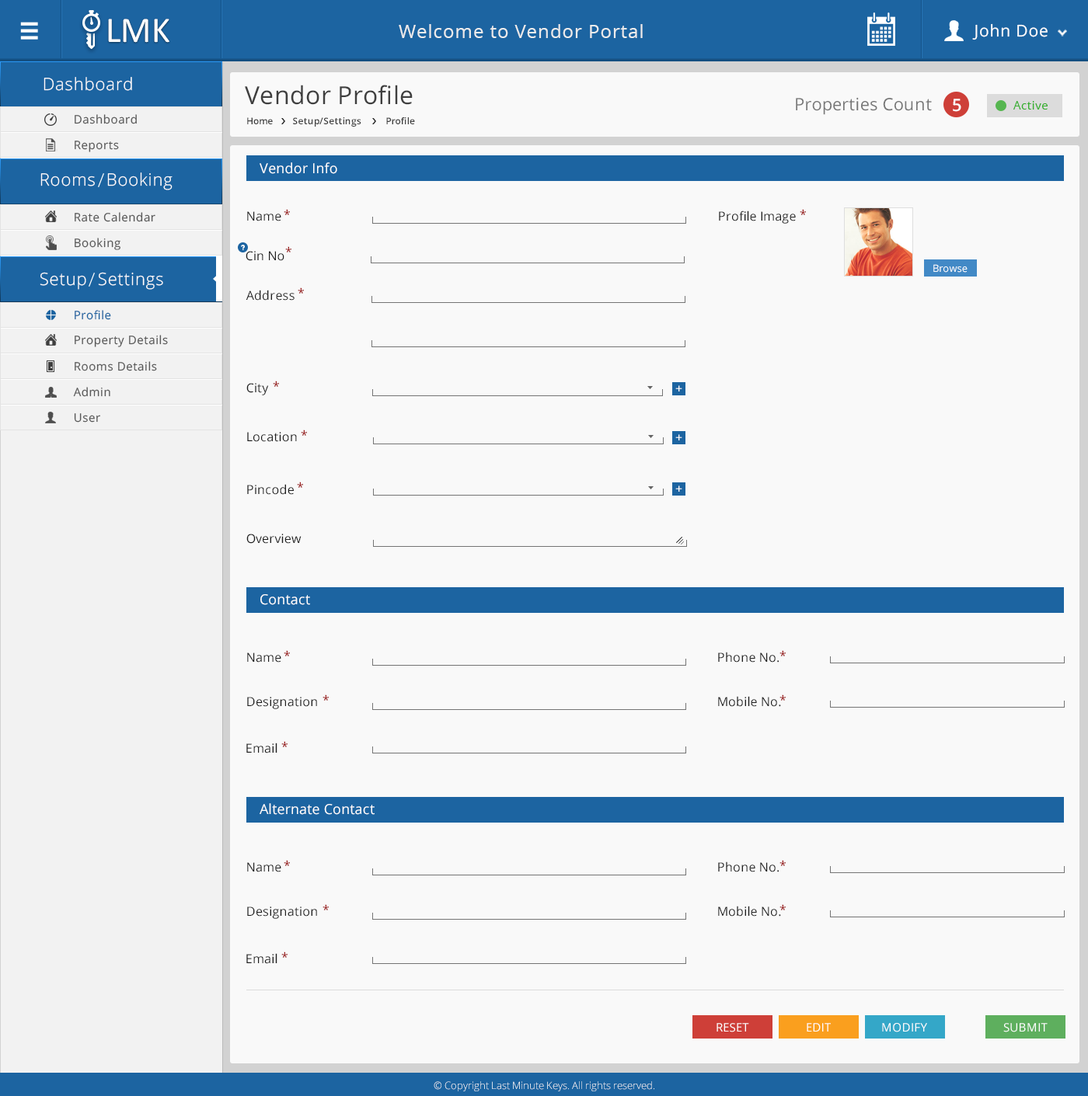
<style>
.page{position:relative;width:1088px;height:1096px;background:#f9f9f9}
.page>*{position:absolute;margin:0}
.t1{font:36.2px "Calibri";letter-spacing:0.01em;color:#ffffff}
.t2{font:18.6px "OpenSans";letter-spacing:0.04em;color:#ececec}
.t3{font:16.3px "OpenSans";letter-spacing:0.04em;color:#ffffff}
.t4{font:19.9px "NexaBold";letter-spacing:0.04em;color:#f9f9f9}
.t5{font:17.1px "OpenSans-Light";letter-spacing:0.04em;color:#ffffff}
.t6{font:24.9px "OpenSans";letter-spacing:0.01em;color:#3f3f3f}
.t7{font:17.1px "OpenSans";letter-spacing:0.01em;color:#777777}
.t8{font:17.1px "OpenSans-Semibold";letter-spacing:0.01em;color:#fefefe}
.t9{font:11.7px "OpenSans";letter-spacing:0.04em;color:#35af2d}
.t10{font:11.7px "OpenSans";letter-spacing:0.04em;color:#585858}
.t11{font:9.3px "OpenSans-Semibold";letter-spacing:0.01em;color:#3f3f3f}
.t12{font:14px "OpenSans";letter-spacing:0.01em;color:#ffffff}
.t13{font:12.4px "OpenSans";letter-spacing:0.01em;color:#940000}
.t14{font:12.4px "OpenSans";letter-spacing:0.01em;color:#1d1d1d}
.t15{font:10.1px "OpenSans";letter-spacing:0.01em;color:#ffffff}
.t16{font:11.7px "OpenSans";letter-spacing:0.04em;color:#1c64a1}
.t17{font:12.4px "OpenSans";letter-spacing:0.01em;color:#ffffff}
.t18{font:11.7px "OpenSans";letter-spacing:0.02em;color:#ffffff;text-transform:uppercase}
.t19{font:10.1px "OpenSans-Light";color:#ffffff}
</style>
<div class="page">
<p class="t1" style="left:108px;top:19px;width:61px;height:24px">LMK</p>
<p class="t2" style="left:399px;top:24px;width:244px;height:14px">Welcome to Vendor Portal</p>
<p class="t3" style="left:972px;top:23px;width:75px;height:17px">John Doe</p>
<p class="t4" style="left:1057px;top:29px;width:10px;height:8px;rotate:90deg">&gt;</p>
<p class="t5" style="left:44px;top:77px;width:88px;height:14px">Dashboard</p>
<p class="t6" style="left:245px;top:85px;width:168px;height:20px">Vendor Profile</p>
<p class="t7" style="left:796px;top:97px;width:136px;height:18px">Properties Count</p>
<p class="t8" style="left:953px;top:99px;width:8px;height:13px">5</p>
<p class="t9" style="left:1013px;top:101px;width:34px;height:9px">Active</p>
<p class="t10" style="left:75px;top:114px;width:62px;height:10px">Dashboard</p>
<p class="t11" style="left:247px;top:117px;width:168px;height:10px">Home        Setup/Settings          Profile</p>
<p class="t10" style="left:75px;top:141px;width:44px;height:11px">Reports</p>
<p class="t5" style="left:40px;top:172px;width:132px;height:18px">Rooms  Booking</p>
<p class="t12" style="left:259px;top:162px;width:78px;height:12px">Vendor Info</p>
<p class="t13" style="left:284px;top:209px;width:6px;height:6px">*</p>
<p class="t13" style="left:799px;top:209px;width:7px;height:6px">*</p>
<p class="t10" style="left:75px;top:212px;width:80px;height:10px">Rate Calendar</p>
<p class="t14" style="left:247px;top:211px;width:34px;height:10px">Name</p>
<p class="t14" style="left:719px;top:211px;width:77px;height:13px">Profile Image</p>
<p class="t10" style="left:75px;top:238px;width:45px;height:12px">Booking</p>
<p class="t14" style="left:246px;top:251px;width:38px;height:10px">Cin No</p>
<p class="t13" style="left:285px;top:246px;width:6px;height:7px">*</p>
<p class="t15" style="left:933px;top:264px;width:34px;height:9px">Browse</p>
<p class="t5" style="left:40px;top:272px;width:123px;height:18px">Setup  Settings</p>
<p class="t14" style="left:246px;top:290px;width:48px;height:11px">Address</p>
<p class="t13" style="left:298px;top:287px;width:6px;height:7px">*</p>
<p class="t16" style="left:75px;top:310px;width:36px;height:10px">Profile</p>
<p class="t10" style="left:75px;top:335px;width:93px;height:12px">Property Details</p>
<p class="t10" style="left:75px;top:361px;width:82px;height:10px">Rooms Details</p>
<p class="t10" style="left:73px;top:387px;width:37px;height:10px">Admin</p>
<p class="t14" style="left:246px;top:383px;width:23px;height:12px">City</p>
<p class="t13" style="left:273px;top:381px;width:6px;height:6px">*</p>
<p class="t17" style="left:675px;top:385px;width:7px;height:7px">+</p>
<p class="t10" style="left:74px;top:413px;width:26px;height:10px">User</p>
<p class="t14" style="left:247px;top:432px;width:50px;height:10px">Location</p>
<p class="t13" style="left:301px;top:430px;width:6px;height:6px">*</p>
<p class="t17" style="left:675px;top:434px;width:7px;height:7px">+</p>
<p class="t14" style="left:247px;top:484px;width:47px;height:11px">Pincode</p>
<p class="t13" style="left:297px;top:482px;width:6px;height:6px">*</p>
<p class="t17" style="left:675px;top:486px;width:7px;height:6px">+</p>
<p class="t14" style="left:246px;top:534px;width:55px;height:10px">Overview</p>
<p class="t12" style="left:260px;top:594px;width:50px;height:11px">Contact</p>
<p class="t14" style="left:247px;top:653px;width:34px;height:10px">Name</p>
<p class="t13" style="left:284px;top:650px;width:6px;height:7px">*</p>
<p class="t14" style="left:718px;top:652px;width:60px;height:11px">Phone No.</p>
<p class="t13" style="left:779px;top:650px;width:6px;height:7px">*</p>
<p class="t14" style="left:247px;top:697px;width:70px;height:12px">Designation</p>
<p class="t13" style="left:322px;top:695px;width:7px;height:6px">*</p>
<p class="t14" style="left:718px;top:696px;width:63px;height:11px">Mobile No.</p>
<p class="t13" style="left:779px;top:695px;width:6px;height:6px">*</p>
<p class="t14" style="left:246px;top:743px;width:31px;height:11px">Email</p>
<p class="t13" style="left:281px;top:741px;width:6px;height:6px">*</p>
<p class="t12" style="left:259px;top:803px;width:115px;height:12px">Alternate Contact</p>
<p class="t14" style="left:247px;top:862px;width:34px;height:11px">Name</p>
<p class="t13" style="left:284px;top:860px;width:6px;height:6px">*</p>
<p class="t14" style="left:718px;top:862px;width:60px;height:11px">Phone No.</p>
<p class="t13" style="left:779px;top:860px;width:6px;height:6px">*</p>
<p class="t13" style="left:322px;top:904px;width:7px;height:7px">*</p>
<p class="t14" style="left:718px;top:906px;width:63px;height:11px">Mobile No.</p>
<p class="t13" style="left:779px;top:904px;width:6px;height:7px">*</p>
<p class="t14" style="left:247px;top:907px;width:70px;height:12px">Designation</p>
<p class="t14" style="left:246px;top:953px;width:31px;height:11px">Email</p>
<p class="t13" style="left:281px;top:952px;width:6px;height:6px">*</p>
<p class="t18" style="left:716px;top:1023px;width:33px;height:10px">Reset</p>
<p class="t18" style="left:806px;top:1023px;width:25px;height:9px">Edit</p>
<p class="t18" style="left:882px;top:1023px;width:45px;height:10px">Modify</p>
<p class="t18" style="left:1003px;top:1023px;width:44px;height:10px">Submit</p>
<p class="t19" style="left:434px;top:1082px;width:220px;height:10px">© Copyright Last Minute Keys. All rights reserved.</p>
</div>
